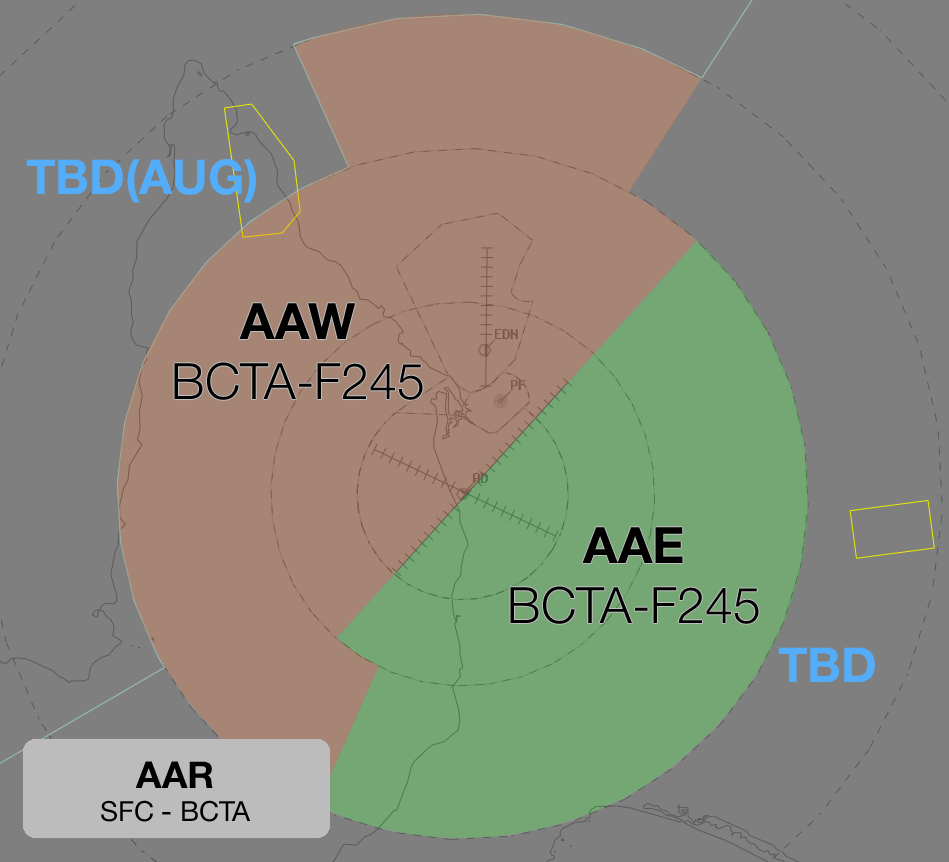
<style>
.page{position:relative;width:949px;height:862px;background:#7f7f7f}
.page>*{position:absolute;margin:0}
.t1{font:48.2px "HelveticaNeue-Bold";color:#53adf9}
.t2{font:50.1px "HelveticaNeue-Light";color:#000000}
.t3{font:50.1px "HelveticaNeue-Bold";color:#000000}
.t4{font:27.8px "HelveticaNeue-Roman";color:#000000}
.t5{font:37px "HelveticaNeue-Bold";color:#000000}
</style>
<div class="page">
<p class="t1" style="left:26px;top:159px;width:230px;height:44px">TBD(AUG)</p>
<p class="t2" style="left:174px;top:303px;width:249px;height:97px;text-align:center"><span class="t3">AAW<br></span>BCTA-F245</p>
<p class="t2" style="left:510px;top:527px;width:249px;height:97px;text-align:center"><span class="t3">AAE<br></span>BCTA-F245</p>
<p class="t1" style="left:778px;top:647px;width:97px;height:35px">TBD</p>
<p class="t4" style="left:101px;top:761px;width:150px;height:61px;text-align:center"><span class="t5">AAR<br></span>SFC - BCTA</p>
</div>
